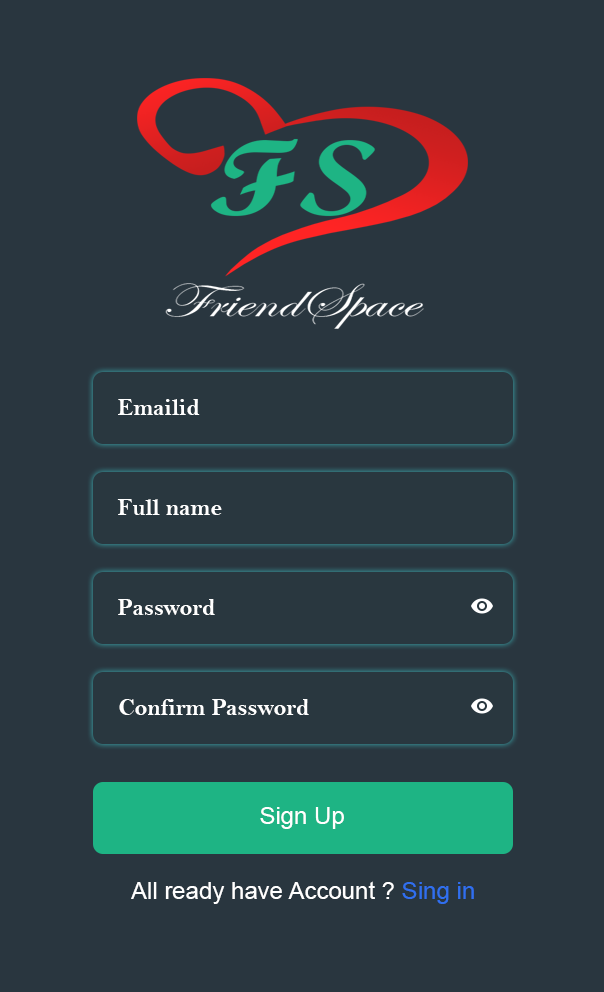
<style>
.page{position:relative;width:604px;height:992px;background:#29363f}
.page>*{position:absolute;margin:0}
.t1{font:24px "BellMTBold";color:#ffffff}
.t2{font:24px "ArialMT";color:#ffffff}
.t3{font:24px "ArialMT";color:#306fef}
</style>
<div class="page">
<p class="t1" style="left:118px;top:399px;width:82px;height:16px">Emailid</p>
<p class="t1" style="left:117px;top:499px;width:105px;height:16px">Full name</p>
<p class="t1" style="left:118px;top:599px;width:97px;height:16px">Password</p>
<p class="t1" style="left:119px;top:699px;width:190px;height:16px">Confirm Password</p>
<p class="t2" style="left:260px;top:807px;width:84px;height:22px">Sign Up</p>
<p class="t2" style="left:131px;top:881px;width:343px;height:23px">All ready have Account ? <span class="t3">Sing in</span></p>
</div>
